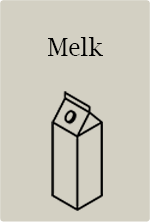
<style>
.page{position:relative;width:150px;height:222px;background:#d3d0c3}
.page>*{position:absolute;margin:0}
.t1{font:24px "LucidaBright";color:#000000}
.t2{font:36px "LucidaBright";color:#000000}
</style>
<div class="page">
<p class="t1" style="left:48px;top:37px;width:55px;height:19px"><span class="t2"><br></span>Melk</p>
</div>
